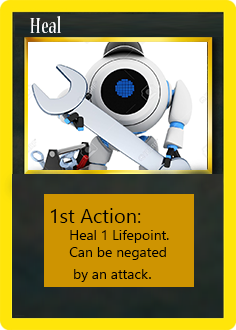
<style>
.page{position:relative;width:236px;height:330px}
.page>*{position:absolute;margin:0}
.t1{font:24px "NuevaStd-Cond";color:#ffffff}
.t2{font:20px "LeelawadeeUI";color:#000000}
.t3{font:14px "LeelawadeeUI";color:#000000}
.t4{font:18px "LeelawadeeUI";color:#000000}
</style>
<div class="page">
<p class="t1" style="left:30px;top:16px;width:31px;height:17px">Heal</p>
<p class="t2" style="left:50px;top:208px;width:91px;height:15px">1st Action:</p>
<p class="t3" style="left:69px;top:230px;width:100px;height:52px">Heal 1 Lifepoint.<br>Can be negated<br> by an attack<span class="t4">.</span></p>
</div>
